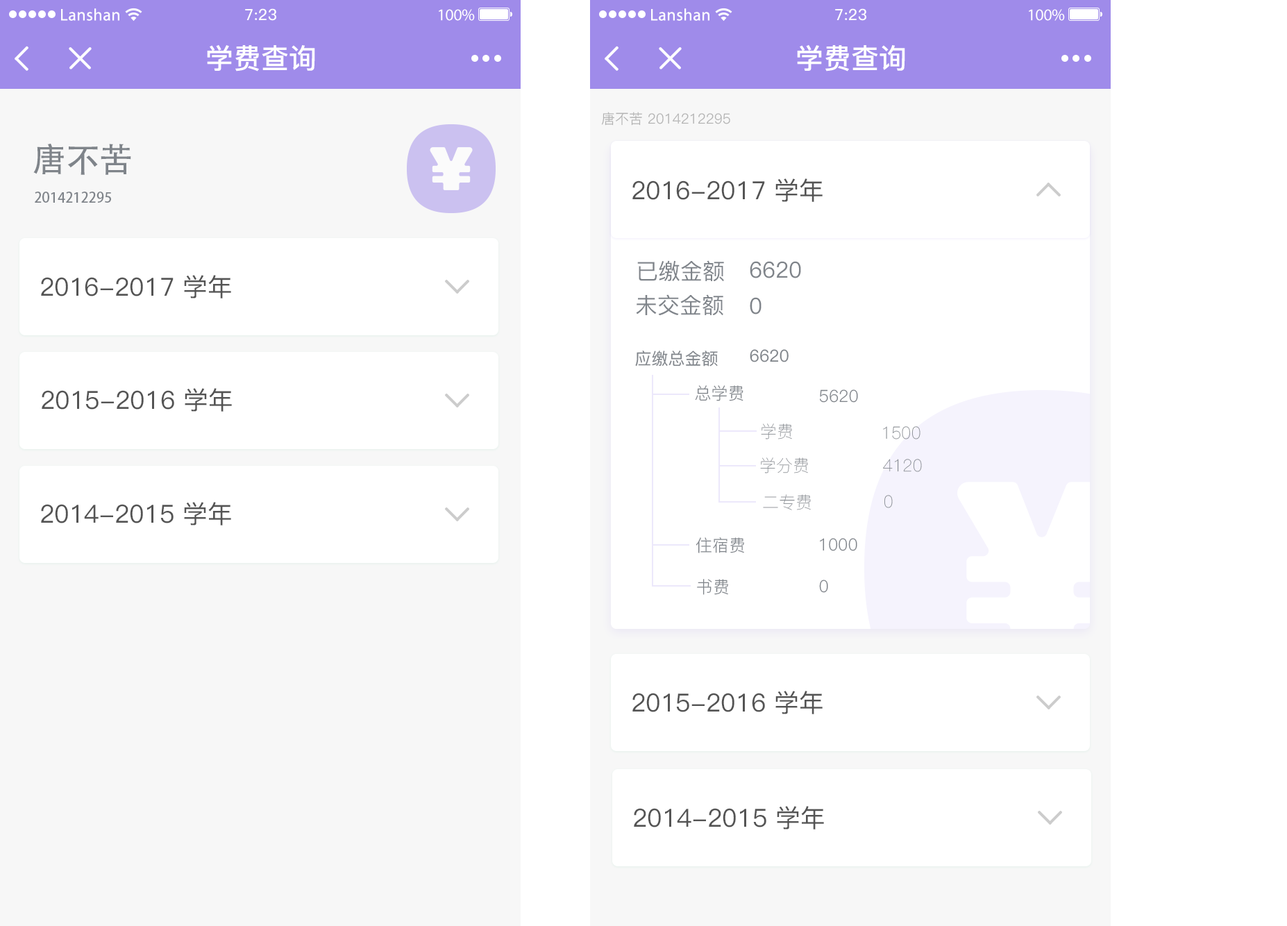
<style>
.page{position:relative;width:1287px;height:926px;background:#ffffff}
.page>*{position:absolute;margin:0}
.t1{font:13.9px "PingFang-SC-Regular";color:#b2b2b2}
.t2{font:33.3px "AdobeHeitiStd-Regular";color:#7f848a}
.t3{font:25px "PingFang-SC-Medium";color:#545454}
.t4{font:13.9px "AdobeHeitiStd-Regular";color:#7f848a}
.t5{font:22.2px "PingFang-SC-Medium";color:#7f848a}
.t6{font:16.7px "PingFang-SC-Medium";color:#7f848a}
.t7{font:16.7px "PingFang-SC-Regular";color:#7f848a}
.t8{font:16.7px "PingFang-SC-ExtraLight";color:#7f848a}
</style>
<div class="page">
<p class="t1" style="left:601px;top:112px;width:129px;height:14px">唐不苦 2014212295</p>
<p class="t2" style="left:33px;top:144px;width:98px;height:31px">唐不苦</p>
<p class="t3" style="left:633px;top:178px;width:190px;height:24px">2016-2017 学年</p>
<p class="t4" style="left:35px;top:192px;width:76px;height:11px">2014212295</p>
<p class="t5" style="left:637px;top:260px;width:87px;height:22px">已缴金额</p>
<p class="t5" style="left:750px;top:261px;width:51px;height:17px">6620</p>
<p class="t3" style="left:41px;top:275px;width:190px;height:24px">2016-2017 学年</p>
<p class="t5" style="left:636px;top:294px;width:88px;height:22px">未交金额</p>
<p class="t5" style="left:750px;top:297px;width:12px;height:18px">0</p>
<p class="t6" style="left:635px;top:351px;width:83px;height:16px">应缴总金额</p>
<p class="t6" style="left:750px;top:349px;width:39px;height:13px">6620</p>
<p class="t3" style="left:42px;top:388px;width:190px;height:24px">2015-2016 学年</p>
<p class="t7" style="left:695px;top:385px;width:49px;height:16px">总学费</p>
<p class="t7" style="left:820px;top:390px;width:38px;height:13px">5620</p>
<p class="t8" style="left:761px;top:424px;width:31px;height:16px">学费</p>
<p class="t8" style="left:883px;top:426px;width:38px;height:14px">1500</p>
<p class="t8" style="left:760px;top:458px;width:48px;height:16px">学分费</p>
<p class="t8" style="left:883px;top:459px;width:39px;height:13px">4120</p>
<p class="t8" style="left:763px;top:494px;width:48px;height:16px">二专费</p>
<p class="t8" style="left:885px;top:495px;width:8px;height:13px">0</p>
<p class="t3" style="left:41px;top:502px;width:190px;height:24px">2014-2015 学年</p>
<p class="t7" style="left:696px;top:537px;width:48px;height:16px">住宿费</p>
<p class="t7" style="left:820px;top:538px;width:38px;height:13px">1000</p>
<p class="t7" style="left:697px;top:579px;width:31px;height:16px">书费</p>
<p class="t7" style="left:819px;top:580px;width:9px;height:13px">0</p>
<p class="t3" style="left:633px;top:691px;width:190px;height:23px">2015-2016 学年</p>
<p class="t3" style="left:634px;top:806px;width:190px;height:24px">2014-2015 学年</p>
</div>
